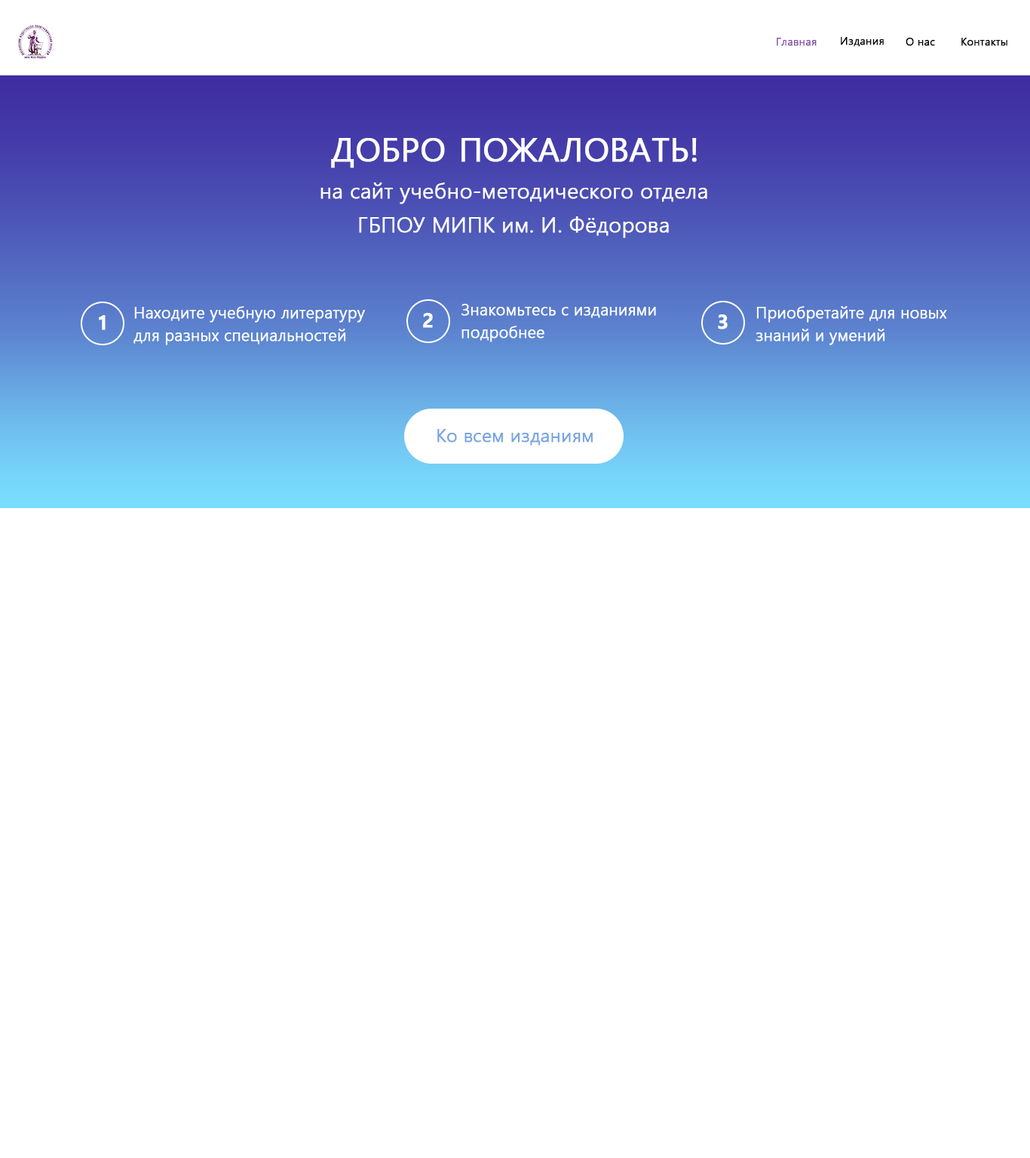
<style>
.page{position:relative;width:1030px;height:1158px;background:#ffffff}
.page>*{position:absolute;margin:0}
.t1{font:10.8px "MalgunGothic-Semilight";color:#8852a8;font-weight:bold}
.t2{font:10.8px "MalgunGothic-Semilight";color:#000000;font-weight:bold}
.t3{font:32.4px "MalgunGothic";color:#ffffff;text-transform:uppercase;font-weight:bold}
.t4{font:21.1px/33.9px "MalgunGothic-Semilight";color:#ffffff;font-weight:bold}
.t5{font:15.8px/22.6px "MalgunGothic-Semilight";color:#ffffff;font-weight:bold}
.t6{font:19.6px "MalgunGothicBold";color:#ffffff;font-weight:bold}
.t7{font:18.1px "MalgunGothic-Semilight";color:#77a5e1;font-weight:bold}
</style>
<div class="page">
<p class="t1" style="left:776px;top:38px;width:40px;height:8px">Главная</p>
<p class="t2" style="left:841px;top:37px;width:43px;height:10px">Издания</p>
<p class="t2" style="left:905px;top:38px;width:30px;height:8px">О нас</p>
<p class="t2" style="left:961px;top:38px;width:46px;height:8px">Контакты</p>
<p class="t3" style="left:331px;top:138px;width:366px;height:30px">Добро пожаловать!</p>
<p class="t4" style="left:320px;top:182px;width:387px;height:56px;text-align:center">на сайт учебно-методического отдела<br>ГБПОУ МИПК им. И. Фёдорова</p>
<p class="t5" style="left:461px;top:304px;width:195px;height:38px">Знакомьтесь с изданиями<br>подробнее</p>
<p class="t6" style="left:99px;top:315px;width:7px;height:15px">1</p>
<p class="t5" style="left:133px;top:306px;width:232px;height:39px">Находите учебную литературу<br>для разных специальностей</p>
<p class="t6" style="left:423px;top:313px;width:10px;height:15px">2</p>
<p class="t6" style="left:718px;top:314px;width:9px;height:15px">3</p>
<p class="t5" style="left:755px;top:306px;width:192px;height:39px">Приобретайте для новых<br>знаний и умений</p>
<p class="t7" style="left:437px;top:429px;width:156px;height:17px">Ко всем изданиям</p>
</div>
